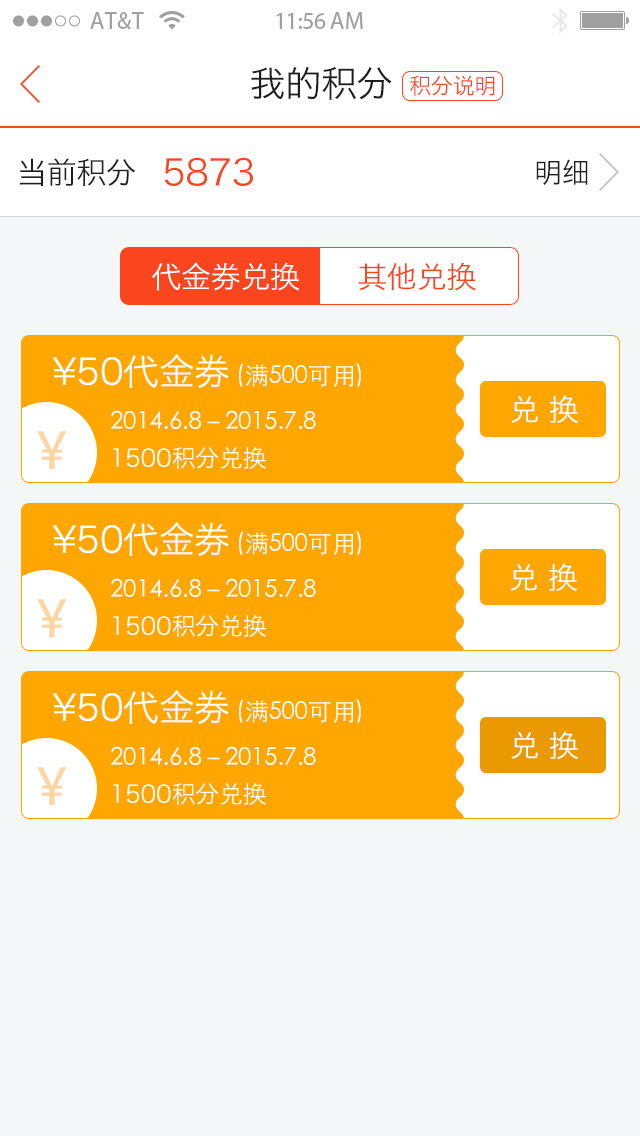
<style>
.page{position:relative;width:640px;height:1136px;background:#f4f7f8}
.page>*{position:absolute;margin:0}
.t1{font:36px "HiraginoSansGB-W3";letter-spacing:-0.01em;color:#1e1e1e}
.t2{font:22px "HiraginoSansGB-W3";letter-spacing:-0.01em;color:#fb451f}
.t3{font:30px "HiraginoSansGB-W3";letter-spacing:-0.01em;color:#1e1e1e}
.t4{font:36px "HiraginoSansGB-W3";letter-spacing:-0.01em;color:#fb451f}
.t5{font:28px "HiraginoSansGB-W3";letter-spacing:-0.01em;color:#1e1e1e}
.t6{font:30px "HiraginoSansGB-W3";letter-spacing:-0.01em;color:#ffffff}
.t7{font:30px "HiraginoSansGB-W3";letter-spacing:-0.01em;color:#fb451f}
.t8{font:36px "HiraginoSansGB-W3";letter-spacing:-0.01em;color:#ffffff}
.t9{font:24px "STHeitiSC-Light";letter-spacing:-0.01em;color:#ffffff}
.t10{font:52.8px "HelveticaNeueLTPro-Roman";letter-spacing:-0.01em;color:#ffd5a3}
.t11{font:24px "HiraginoSansGB-W3";letter-spacing:-0.01em;color:#ffffff}
</style>
<div class="page">
<p class="t1" style="left:251px;top:67px;width:141px;height:33px">我的积分</p>
<p class="t2" style="left:410px;top:75px;width:85px;height:21px">积分说明</p>
<p class="t3" style="left:20px;top:158px;width:116px;height:28px">当前积分</p>
<p class="t4" style="left:164px;top:157px;width:89px;height:29px">5873</p>
<p class="t5" style="left:536px;top:159px;width:52px;height:26px">明细</p>
<p class="t6" style="left:152px;top:262px;width:148px;height:29px">代金券兑换</p>
<p class="t7" style="left:359px;top:262px;width:117px;height:29px">其他兑换</p>
<p class="t8" style="left:52px;top:354px;width:177px;height:34px">¥50代金券</p>
<p class="t9" style="left:239px;top:363px;width:122px;height:24px">(满500可用)</p>
<p class="t6" style="left:511px;top:395px;width:67px;height:29px">兑 换</p>
<p class="t9" style="left:110px;top:410px;width:206px;height:19px">2014.6.8－2015.7.8</p>
<p class="t10" style="left:37px;top:431px;width:30px;height:38px">¥</p>
<p class="t11" style="left:113px;top:447px;width:153px;height:22px">1500积分兑换</p>
<p class="t8" style="left:52px;top:522px;width:177px;height:34px">¥50代金券</p>
<p class="t9" style="left:239px;top:531px;width:122px;height:24px">(满500可用)</p>
<p class="t6" style="left:510px;top:563px;width:67px;height:29px">兑 换</p>
<p class="t9" style="left:110px;top:578px;width:206px;height:19px">2014.6.8－2015.7.8</p>
<p class="t10" style="left:37px;top:599px;width:30px;height:38px">¥</p>
<p class="t11" style="left:113px;top:615px;width:153px;height:22px">1500积分兑换</p>
<p class="t8" style="left:52px;top:690px;width:177px;height:34px">¥50代金券</p>
<p class="t9" style="left:239px;top:699px;width:122px;height:24px">(满500可用)</p>
<p class="t6" style="left:511px;top:731px;width:67px;height:29px">兑 换</p>
<p class="t9" style="left:110px;top:746px;width:206px;height:19px">2014.6.8－2015.7.8</p>
<p class="t10" style="left:37px;top:767px;width:30px;height:38px">¥</p>
<p class="t11" style="left:113px;top:783px;width:153px;height:22px">1500积分兑换</p>
</div>
